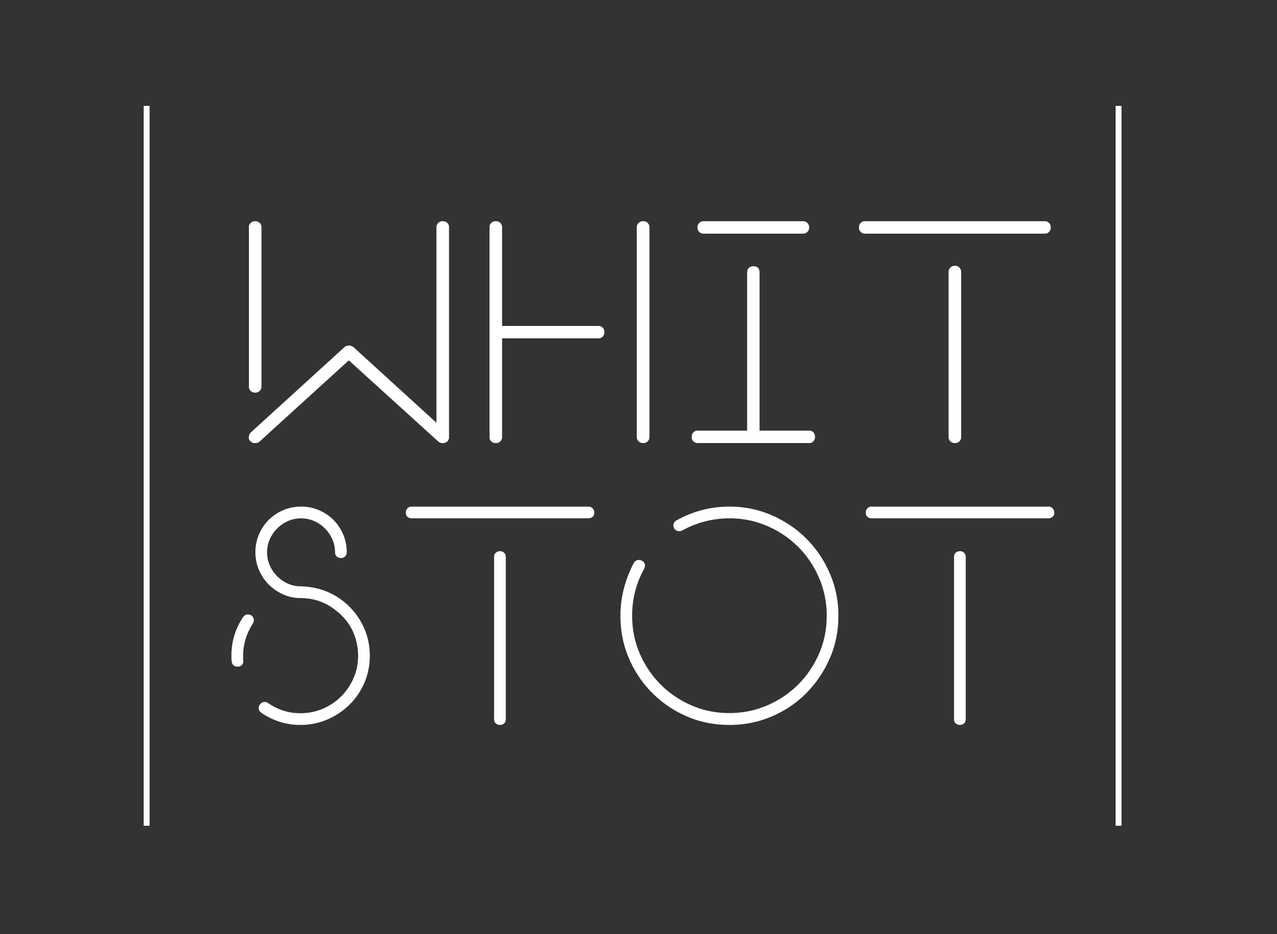
<style>
.page{position:relative;width:1277px;height:934px;background:#333333}
.page>*{position:absolute;margin:0}
.t1{font:324.8px "Break";color:#ffffff;font-weight:bold}
.t2{font:307.5px "Break-ExtraLight";color:#ffffff;font-weight:bold}
</style>
<div class="page">
<p class="t1" style="left:248px;top:221px;width:803px;height:222px">WHIT</p>
<p class="t2" style="left:231px;top:506px;width:824px;height:219px">STOT</p>
</div>
